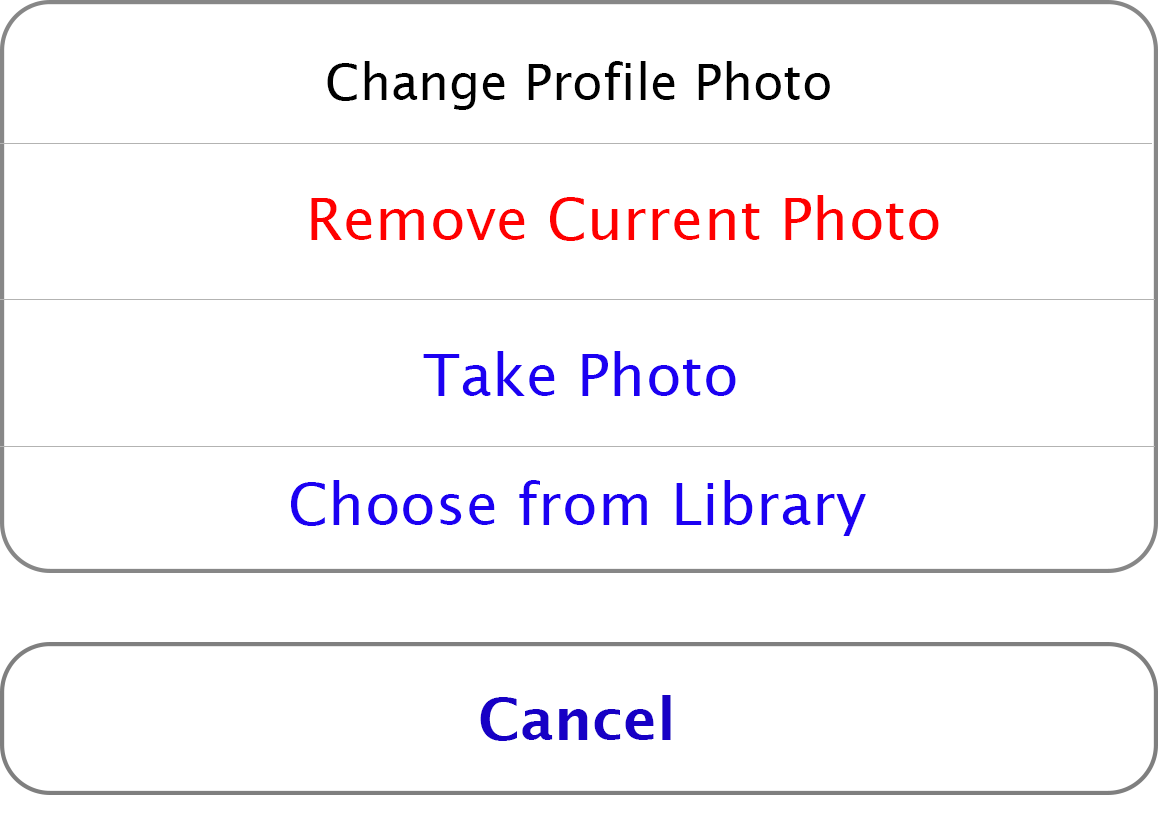
<style>
.page{position:relative;width:1158px;height:819px;background:#ffffff}
.page>*{position:absolute;margin:0}
.t1{font:50px "LucidaSans";color:#000000}
.t2{font:58.3px "LucidaSans";color:#ff0000}
.t3{font:58.3px "LucidaSans";color:#1c00f2}
.t4{font:58.3px "LucidaSans-Demi";color:#1700c5}
</style>
<div class="page">
<p class="t1" style="left:327px;top:61px;width:503px;height:49px">Change Profile Photo</p>
<p class="t2" style="left:311px;top:195px;width:628px;height:46px">Remove Current Photo</p>
<p class="t3" style="left:423px;top:351px;width:313px;height:45px">Take Photo</p>
<p class="t3" style="left:291px;top:480px;width:575px;height:56px">Choose from Library</p>
<p class="t4" style="left:480px;top:695px;width:191px;height:46px">Cancel</p>
</div>
